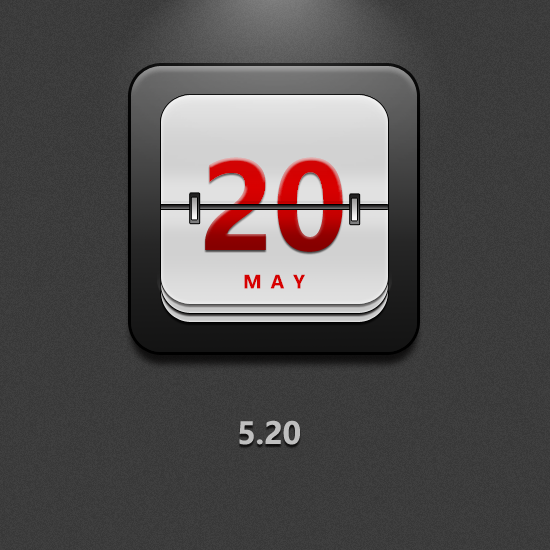
<style>
.page{position:relative;width:550px;height:550px}
.page>*{position:absolute;margin:0}
.t1{font:120px "MicrosoftYaHei-Bold"}
.t2{font:18px "MicrosoftYaHei-Bold";letter-spacing:0.5em;color:#c00000}
.t3{font:30px "MicrosoftYaHei-Bold";color:#bfbfbf}
</style>
<div class="page">
<p class="t1" style="left:205px;top:157px;width:138px;height:95px">20</p>
<p class="t2" style="left:244px;top:274px;width:61px;height:15px">MAY</p>
<p class="t3" style="left:239px;top:420px;width:61px;height:25px">5.20</p>
</div>
